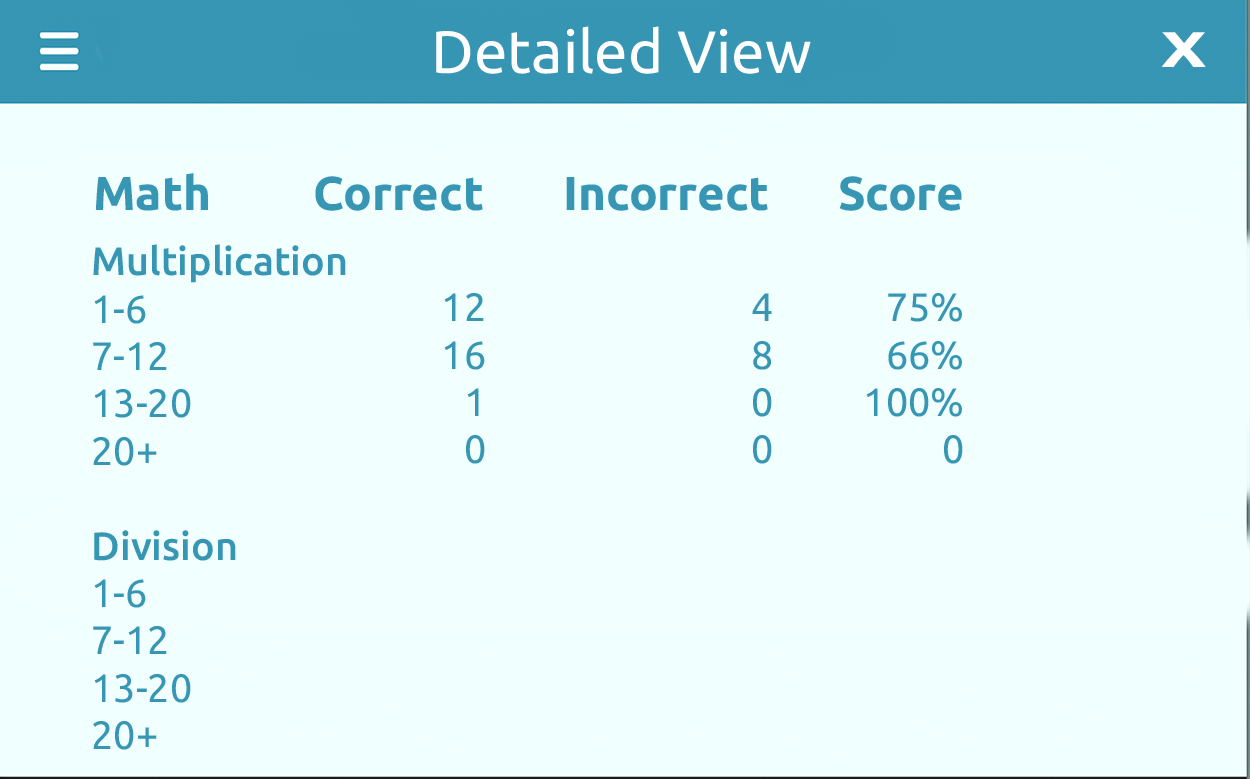
<style>
.page{position:relative;width:1250px;height:779px;background:#f1ffff}
.page>*{position:absolute;margin:0}
.t1{font:59.9px "Ubuntu";color:#ffffff}
.t2{font:50px "Ubuntu-Bold";color:#ffffff;scale:1.35 1}
.t3{font:47.4px "Ubuntu-Bold";color:#3796b4}
.t4{font:39.5px "Ubuntu";color:#3796b4}
.t5{font:39.5px "Ubuntu-Medium";color:#3796b4}
</style>
<div class="page">
<p class="t1" style="left:436px;top:26px;width:375px;height:48px">Detailed View</p>
<p class="t2" style="left:1161px;top:32px;width:45px;height:35px">X</p>
<p class="t3" style="left:95px;top:173px;width:867px;height:38px">Math         Correct       Incorrect      Score</p>
<p class="t4" style="left:93px;top:244px;width:253px;height:506px"><span class="t5">Multiplication <br></span>1-6<br>7-12<br>13-20<br>20+<br><br><span class="t5">Division<br></span>1-6<br>7-12<br>13-20<br>20+</p>
<p class="t4" style="left:444px;top:293px;width:41px;height:171px;text-align:right">12<br>16<br>1<br>0</p>
<p class="t4" style="left:752px;top:293px;width:20px;height:171px;text-align:right">4<br>8<br>0<br>0</p>
<p class="t4" style="left:866px;top:293px;width:97px;height:171px;text-align:right">75%<br>66%<br>100%<br>0</p>
</div>
